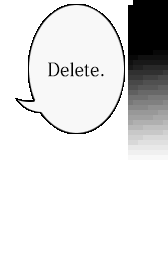
<style>
.page{position:relative;width:168px;height:256px;background:#ffffff}
.page>*{position:absolute;margin:0}
.t1{font:18.2px "MatissePro-M";letter-spacing:-0.01em;color:#000000;font-weight:bold;scale:0.91 1}
</style>
<div class="page">
<p class="t1" style="left:48px;top:62px;width:56px;height:15px">Delete.</p>
</div>
